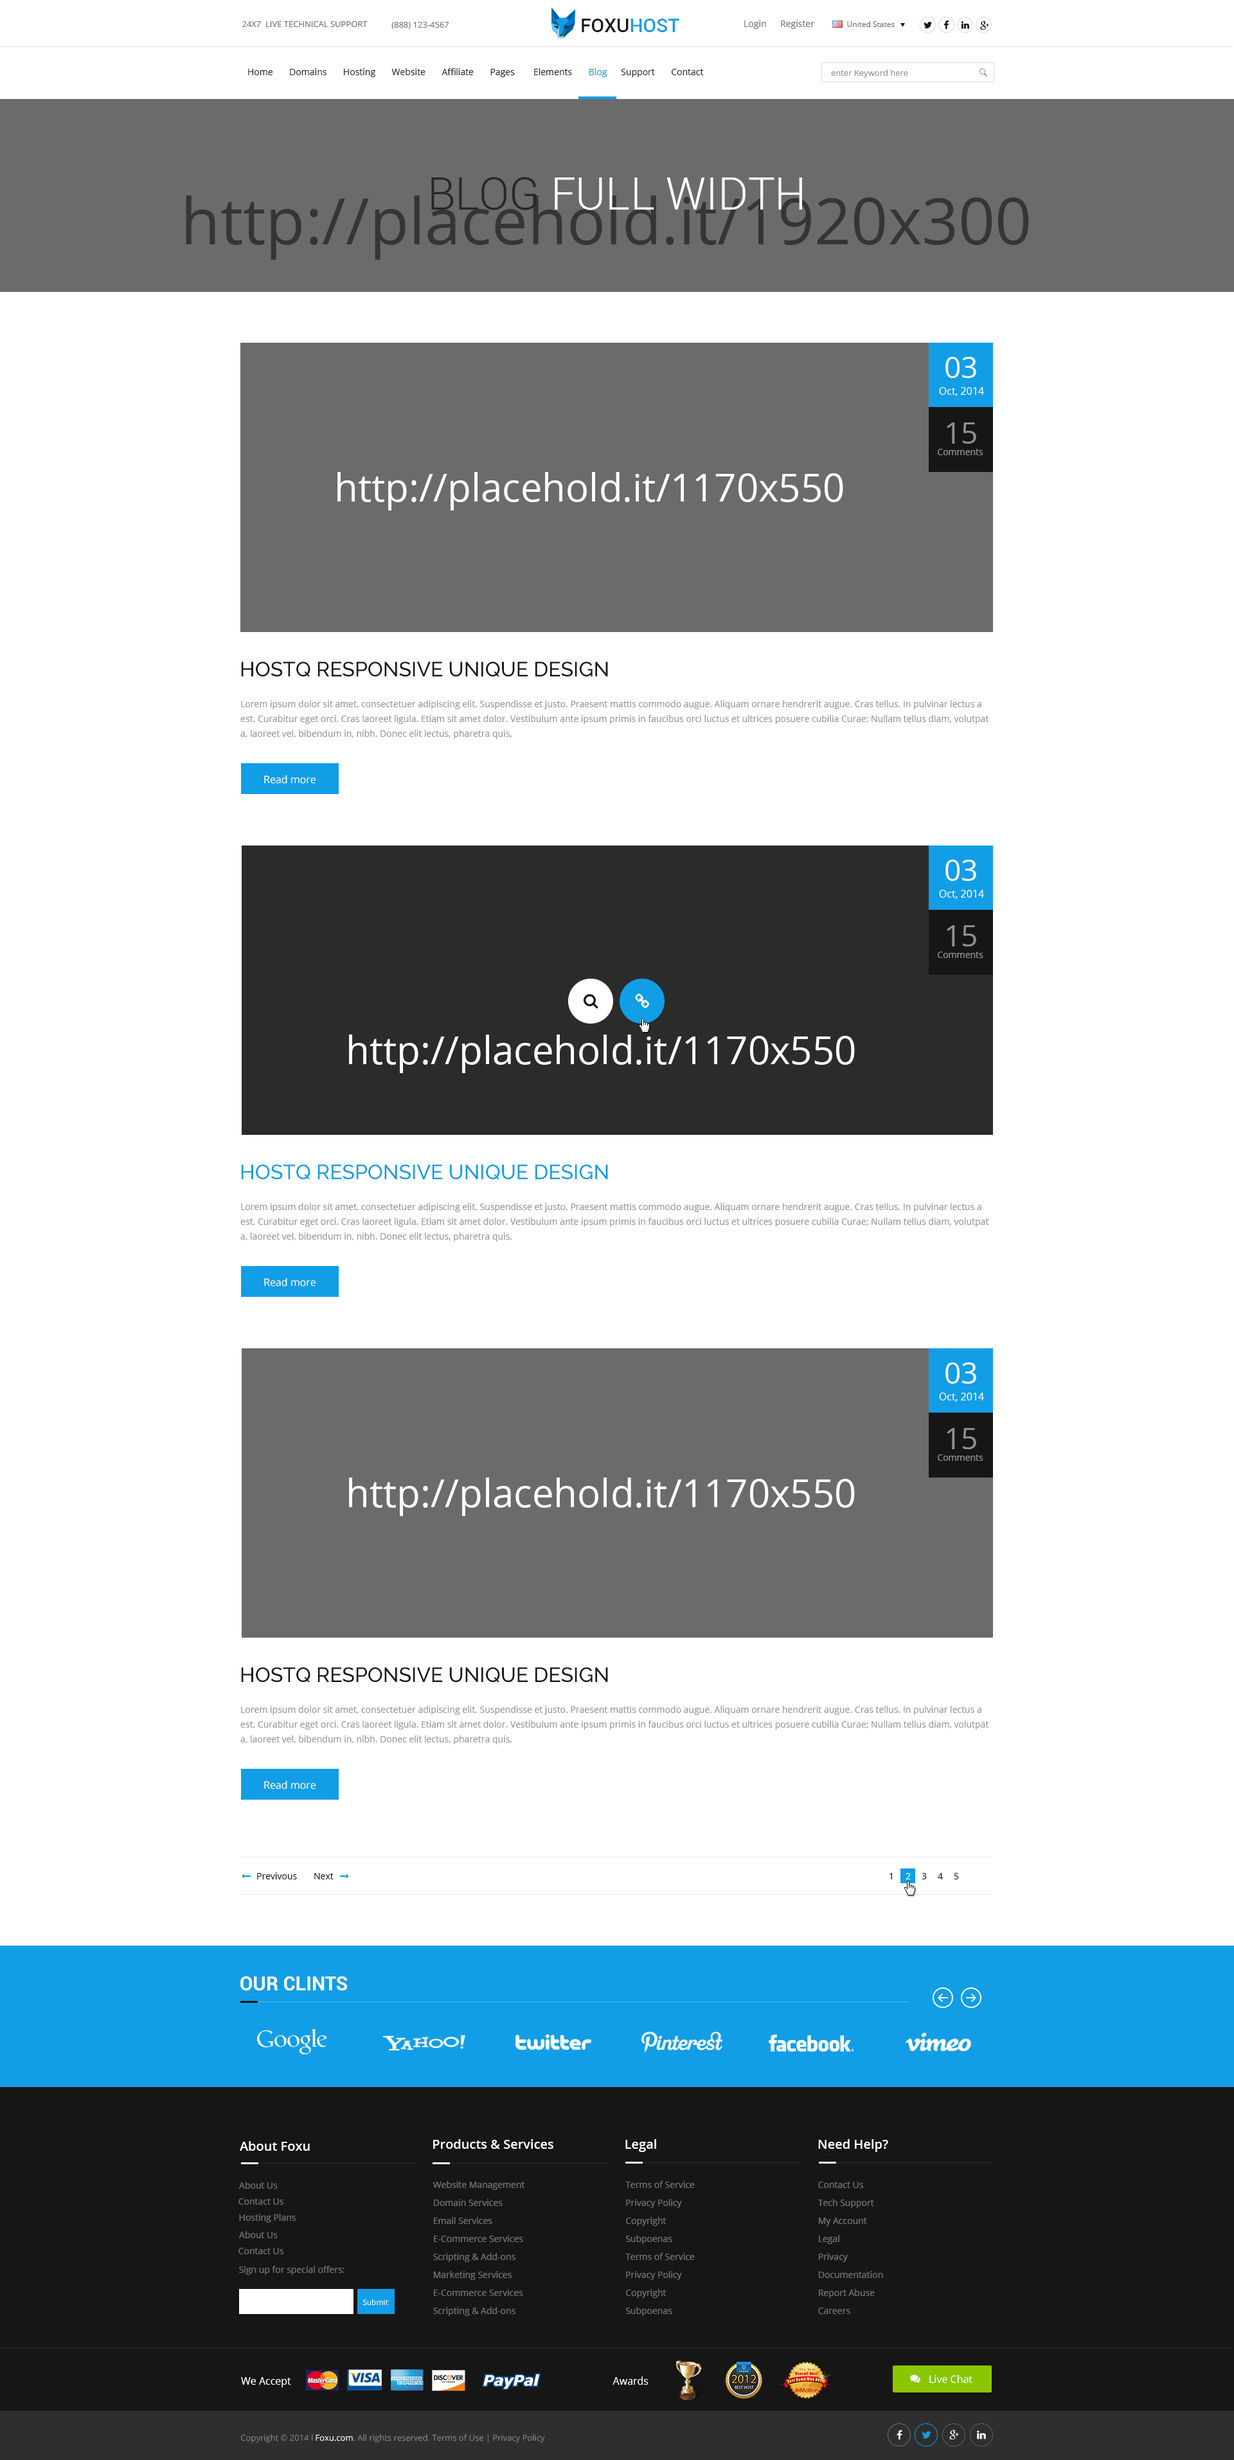
<style>
.page{position:relative;width:1234px;height:2460px;background:#ffffff}
.page>*{position:absolute;margin:0}
.t1{font:8.4px "OpenSans";color:#727272;text-transform:uppercase}
.t2{font:19.3px "Roboto-Medium";color:#161616;text-transform:uppercase}
.t3{font:19.3px "Roboto-Medium";color:#119ee7;text-transform:uppercase}
.t4{font:9px "OpenSans";color:#727272}
.t5{font:7.7px "OpenSans";color:#727272}
.t6{font:9px "OpenSans";color:#272727}
.t7{font:9px "OpenSans";color:#119ee7}
.t8{font:8.4px "OpenSans";color:#949494}
.t9{font:45px "Roboto-Light";color:#ffffff;text-transform:uppercase}
.t10{font:45px "Roboto-Light";color:#272727;text-transform:uppercase}
.t11{font:64.3px "OpenSans";color:#353535}
.t12{font:29.6px "OpenSans";color:#ffffff;text-transform:uppercase}
.t13{font:10.3px "OpenSans";color:#ffffff}
.t14{font:29.6px "OpenSans";color:#909090;text-transform:uppercase}
.t15{font:9px "OpenSans";color:#949393}
.t16{font:38.6px "OpenSans";color:#ffffff}
.t17{font:20.6px "Raleway-Medium";color:#161616;text-transform:uppercase}
.t18{font:9px/14.8px "OpenSans";color:#969696}
.t19{font:20.6px "Raleway-Medium";color:#119ee7;text-transform:uppercase}
.t20{font:9px "OpenSans";color:#161616}
.t21{font:9px "OpenSans";color:#ffffff}
.t22{font:19.3px "Roboto-Bold";color:#ffffff;text-transform:uppercase}
.t23{font:12.9px "OpenSans-Semibold";color:#ffffff}
.t24{font:9px "OpenSans";color:#737373}
.t25{font:9px/18px "OpenSans";color:#737373}
.t26{font:7.7px "OpenSans";color:#ffffff}
.t27{font:8.4px "OpenSans";color:#858585}
.t28{font:8.4px "OpenSans";color:#ffffff}
</style>
<div class="page">
<p class="t1" style="left:242px;top:21px;width:126px;height:6px">24x7  live Technical Support</p>
<p class="t1" style="left:392px;top:22px;width:57px;height:7px">(888) 123-4567</p>
<p class="t2" style="left:582px;top:19px;width:98px;height:13px">foxu<span class="t3">host</span></p>
<p class="t4" style="left:744px;top:20px;width:22px;height:9px">Login</p>
<p class="t4" style="left:781px;top:20px;width:34px;height:9px">Register</p>
<p class="t5" style="left:847px;top:21px;width:48px;height:6px">United States</p>
<p class="t6" style="left:248px;top:68px;width:456px;height:9px">Home       Domains       Hosting       Website       Affiliate       Pages        Elements       <span class="t7">Blog</span>      Support       Contact</p>
<p class="t8" style="left:831px;top:69px;width:77px;height:9px">enter Keyword here</p>
<p class="t9" style="left:431px;top:177px;width:371px;height:33px"><span class="t10">Blog</span> Full width</p>
<p class="t11" style="left:186px;top:195px;width:843px;height:65px">http://placehold.it/1920x300</p>
<p class="t12" style="left:946px;top:357px;width:31px;height:21px">03</p>
<p class="t13" style="left:939px;top:387px;width:45px;height:9px">Oct, 2014</p>
<p class="t14" style="left:947px;top:422px;width:30px;height:22px">15</p>
<p class="t15" style="left:938px;top:449px;width:46px;height:6px">Comments</p>
<p class="t16" style="left:338px;top:472px;width:505px;height:38px">http://placehold.it/1170x550</p>
<p class="t17" style="left:241px;top:662px;width:367px;height:15px">Hostq Responsive unique design</p>
<p class="t18" style="left:240px;top:700px;width:749px;height:39px">Lorem ipsum dolor sit amet, consectetuer adipiscing elit. Suspendisse et justo. Praesent mattis commodo augue. Aliquam ornare hendrerit augue. Cras tellus. In pulvinar lectus a est. Curabitur eget orci. Cras laoreet ligula. Etiam sit amet dolor. Vestibulum ante ipsum primis in faucibus orci luctus et ultrices posuere cubilia Curae; Nullam tellus diam, volutpat a, laoreet vel, bibendum in, nibh. Donec elit lectus, pharetra quis,</p>
<p class="t13" style="left:264px;top:775px;width:52px;height:9px">Read more</p>
<p class="t12" style="left:946px;top:860px;width:31px;height:21px">03</p>
<p class="t13" style="left:939px;top:890px;width:45px;height:9px">Oct, 2014</p>
<p class="t14" style="left:947px;top:925px;width:30px;height:21px">15</p>
<p class="t15" style="left:938px;top:951px;width:46px;height:7px">Comments</p>
<p class="t16" style="left:349px;top:1034px;width:506px;height:39px">http://placehold.it/1170x550</p>
<p class="t19" style="left:241px;top:1164px;width:367px;height:16px">Hostq Responsive unique design</p>
<p class="t18" style="left:240px;top:1203px;width:749px;height:38px">Lorem ipsum dolor sit amet, consectetuer adipiscing elit. Suspendisse et justo. Praesent mattis commodo augue. Aliquam ornare hendrerit augue. Cras tellus. In pulvinar lectus a est. Curabitur eget orci. Cras laoreet ligula. Etiam sit amet dolor. Vestibulum ante ipsum primis in faucibus orci luctus et ultrices posuere cubilia Curae; Nullam tellus diam, volutpat a, laoreet vel, bibendum in, nibh. Donec elit lectus, pharetra quis,</p>
<p class="t13" style="left:264px;top:1277px;width:52px;height:9px">Read more</p>
<p class="t12" style="left:946px;top:1362px;width:31px;height:21px">03</p>
<p class="t13" style="left:939px;top:1392px;width:45px;height:9px">Oct, 2014</p>
<p class="t14" style="left:947px;top:1428px;width:30px;height:21px">15</p>
<p class="t15" style="left:938px;top:1454px;width:46px;height:7px">Comments</p>
<p class="t16" style="left:349px;top:1477px;width:506px;height:39px">http://placehold.it/1170x550</p>
<p class="t17" style="left:241px;top:1667px;width:367px;height:15px">Hostq Responsive unique design</p>
<p class="t18" style="left:240px;top:1706px;width:749px;height:38px">Lorem ipsum dolor sit amet, consectetuer adipiscing elit. Suspendisse et justo. Praesent mattis commodo augue. Aliquam ornare hendrerit augue. Cras tellus. In pulvinar lectus a est. Curabitur eget orci. Cras laoreet ligula. Etiam sit amet dolor. Vestibulum ante ipsum primis in faucibus orci luctus et ultrices posuere cubilia Curae; Nullam tellus diam, volutpat a, laoreet vel, bibendum in, nibh. Donec elit lectus, pharetra quis,</p>
<p class="t13" style="left:264px;top:1780px;width:52px;height:9px">Read more</p>
<p class="t20" style="left:257px;top:1872px;width:40px;height:7px">Previvous</p>
<p class="t20" style="left:314px;top:1873px;width:20px;height:6px">Next</p>
<p class="t20" style="left:890px;top:1873px;width:2px;height:6px">1</p>
<p class="t21" style="left:906px;top:1873px;width:5px;height:6px">2</p>
<p class="t20" style="left:922px;top:1873px;width:5px;height:6px">3</p>
<p class="t20" style="left:938px;top:1873px;width:5px;height:6px">4</p>
<p class="t20" style="left:954px;top:1873px;width:5px;height:6px">5</p>
<p class="t22" style="left:240px;top:1976px;width:107px;height:14px">Our Clints</p>
<p class="t23" style="left:240px;top:2141px;width:70px;height:9px">About Foxu</p>
<p class="t23" style="left:433px;top:2139px;width:121px;height:9px">Products &amp; Services</p>
<p class="t23" style="left:626px;top:2139px;width:30px;height:13px">Legal</p>
<p class="t23" style="left:818px;top:2139px;width:70px;height:13px">Need Help?</p>
<p class="t24" style="left:239px;top:2181px;width:39px;height:7px">About Us</p>
<p class="t25" style="left:433px;top:2181px;width:92px;height:135px">Website Management<br>    Domain Services<br>    Email Services<br>    E-Commerce Services<br>    Scripting &amp; Add-ons<br>    Marketing Services<br>    E-Commerce Services<br>    Scripting &amp; Add-ons</p>
<p class="t25" style="left:626px;top:2181px;width:69px;height:135px">Terms of Service<br>Privacy Policy<br>Copyright<br>Subpoenas<br>Terms of Service<br>Privacy Policy<br>Copyright<br>Subpoenas</p>
<p class="t25" style="left:818px;top:2181px;width:65px;height:133px">Contact Us<br>    Tech Support<br>    My Account<br>    Legal<br>    Privacy<br>    Documentation<br>    Report Abuse<br>    Careers</p>
<p class="t24" style="left:239px;top:2198px;width:45px;height:6px">Contact Us</p>
<p class="t24" style="left:239px;top:2213px;width:57px;height:9px">Hosting Plans</p>
<p class="t24" style="left:239px;top:2231px;width:39px;height:7px">About Us</p>
<p class="t24" style="left:239px;top:2247px;width:45px;height:7px">Contact Us</p>
<p class="t24" style="left:239px;top:2265px;width:106px;height:9px">Sign up for special offers:</p>
<p class="t26" style="left:363px;top:2299px;width:25px;height:6px">Submit</p>
<p class="t13" style="left:241px;top:2377px;width:50px;height:10px">We Accept</p>
<p class="t13" style="left:613px;top:2376px;width:36px;height:8px">Awards</p>
<p class="t13" style="left:930px;top:2374px;width:43px;height:9px">Live Chat</p>
<p class="t27" style="left:241px;top:2434px;width:304px;height:8px">Copyright © 2014 l <span class="t28">Foxu.com</span>. All rights reserved. Terms of Use | Privacy Policy</p>
</div>
